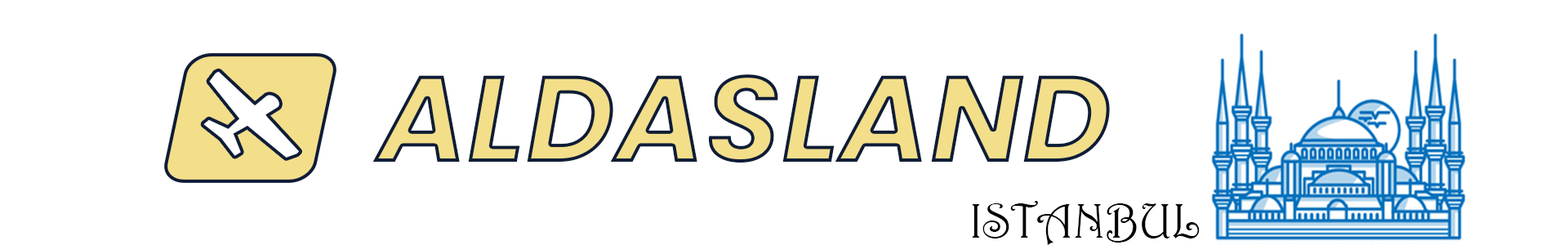
<style>
.page{position:relative;width:1568px;height:245px;background:#ffffff}
.page>*{position:absolute;margin:0}
.t1{font:122.5px "Poppins-BoldItalic";color:#f3de8a}
.t2{font:49px "Harrington";color:#000000}
</style>
<div class="page">
<p class="t1" style="left:372px;top:74px;width:738px;height:89px">ALDASLAND</p>
<p class="t2" style="left:972px;top:201px;width:228px;height:44px">ISTANBUL</p>
</div>
